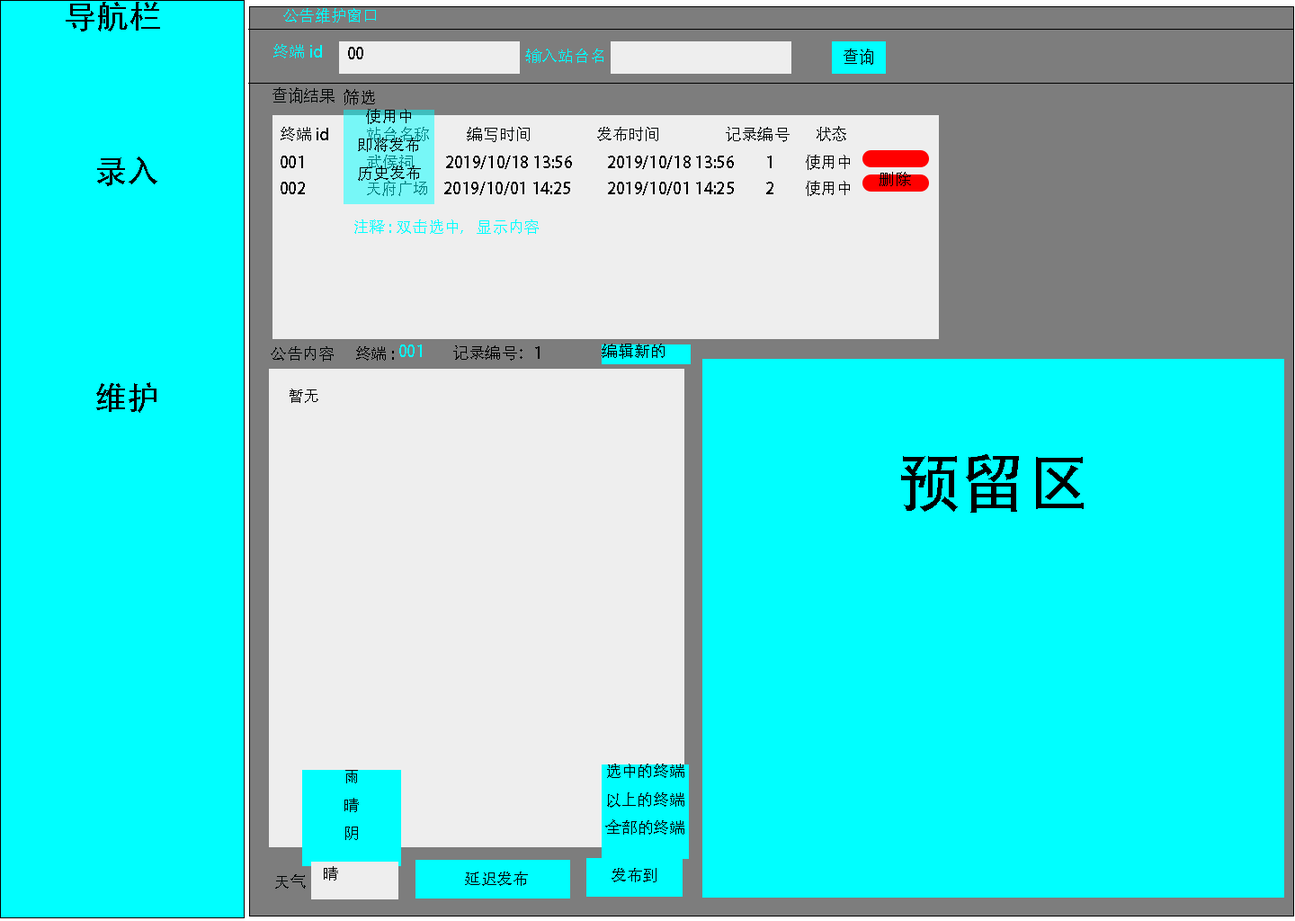
<style>
.page{position:relative;width:1295px;height:921px;background:#00ffff}
.page>*{position:absolute;margin:0}
.t1{font:32.4px "AdobeHeitiStd-Regular";color:#000000}
.t2{font:16.2px "AdobeHeitiStd-Regular";color:#00ffff}
.t3{font:16.2px "AdobeHeitiStd-Regular";color:#000000}
.t4{font:16.2px "AdobeHeitiStd-Regular";color:#010606}
.t5{font:64.7px "AdobeHeitiStd-Regular";color:#000000}
</style>
<div class="page">
<p class="t1" style="left:66px;top:2px;width:94px;height:29px">导航栏</p>
<p class="t2" style="left:283px;top:8px;width:93px;height:15px">公告维护窗口</p>
<p class="t2" style="left:273px;top:44px;width:49px;height:14px">终端id</p>
<p class="t3" style="left:348px;top:47px;width:15px;height:12px">00</p>
<p class="t2" style="left:525px;top:49px;width:78px;height:14px">输入站台名</p>
<p class="t4" style="left:844px;top:49px;width:29px;height:16px">查询</p>
<p class="t4" style="left:272px;top:87px;width:63px;height:16px">查询结果</p>
<p class="t3" style="left:344px;top:89px;width:31px;height:16px">筛选</p>
<p class="t3" style="left:358px;top:109px;width:63px;height:72px;text-align:center">使用中<br>即将发布<br>历史发布</p>
<p class="t4" style="left:281px;top:126px;width:565px;height:16px">终端 id          站台名称  编写时间   发布时间   记录编号       状态</p>
<p class="t1" style="left:96px;top:156px;width:61px;height:257px;text-align:center">录入<br><br><br><br>维护</p>
<p class="t3" style="left:281px;top:155px;width:569px;height:15px">001           武侯祠   2019/10/18 13:56    2019/10/18 13:56 1   使用中</p>
<p class="t3" style="left:879px;top:172px;width:32px;height:14px">删除</p>
<p class="t3" style="left:281px;top:181px;width:569px;height:15px">002        天府广场    2019/10/01 14:25  2019/10/01 14:25 2   使用中</p>
<p class="t2" style="left:354px;top:219px;width:185px;height:16px">注释:双击选中，显示内容</p>
<p class="t4" style="left:271px;top:346px;width:63px;height:16px">公告内容</p>
<p class="t3" style="left:356px;top:346px;width:38px;height:15px">终端:</p>
<p class="t2" style="left:399px;top:344px;width:23px;height:13px">001</p>
<p class="t3" style="left:453px;top:345px;width:87px;height:16px">记录编号：1</p>
<p class="t3" style="left:602px;top:344px;width:63px;height:15px">编辑新的</p>
<p class="t3" style="left:290px;top:388px;width:28px;height:15px">暂无</p>
<p class="t5" style="left:901px;top:454px;width:183px;height:59px">预留区</p>
<p class="t4" style="left:344px;top:770px;width:15px;height:70px;text-align:center">雨<br>晴<br>阴</p>
<p class="t4" style="left:605px;top:763px;width:79px;height:72px;text-align:center">选中的终端<br>以上的终端<br>全部的终端</p>
<p class="t3" style="left:324px;top:866px;width:14px;height:14px">晴</p>
<p class="t4" style="left:611px;top:868px;width:45px;height:14px">发布到</p>
<p class="t4" style="left:275px;top:874px;width:31px;height:14px">天气</p>
<p class="t4" style="left:465px;top:871px;width:63px;height:15px">延迟发布</p>
</div>
